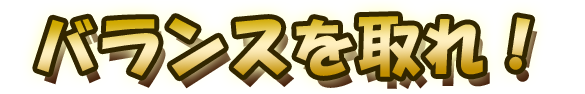
<style>
.page{position:relative;width:585px;height:94px}
.page>*{position:absolute;margin:0}
.t1{font:64.8px "HGSoeiKakupoptai"}
</style>
<div class="page">
<p class="t1" style="left:37px;top:16px;width:494px;height:61px">バランスを取れ！</p>
</div>
